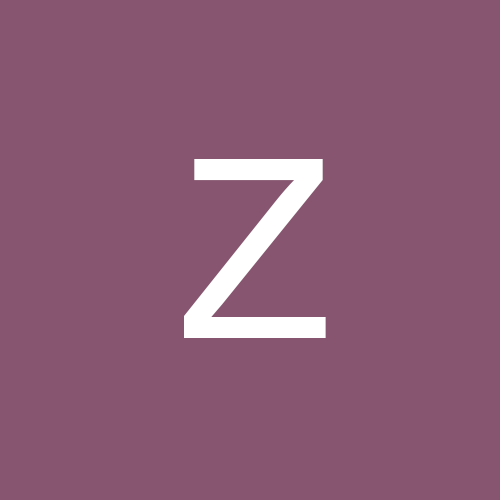
<style>
.page{position:relative;width:500px;height:500px;background:#87556f}
.page>*{position:absolute;margin:0}
.t1{font:250px "ArialMT";color:#ffffff}
</style>
<div class="page">
<p class="t1" style="left:184px;top:159px;width:142px;height:179px">Z</p>
</div>
